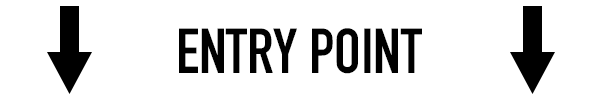
<style>
.page{position:relative;width:600px;height:100px;background:#ffffff}
.page>*{position:absolute;margin:0}
.t1{font:62.5px "DINCondensed-Bold";color:#000000}
</style>
<div class="page">
<p class="t1" style="left:179px;top:28px;width:243px;height:46px">ENTRY POINT</p>
</div>
